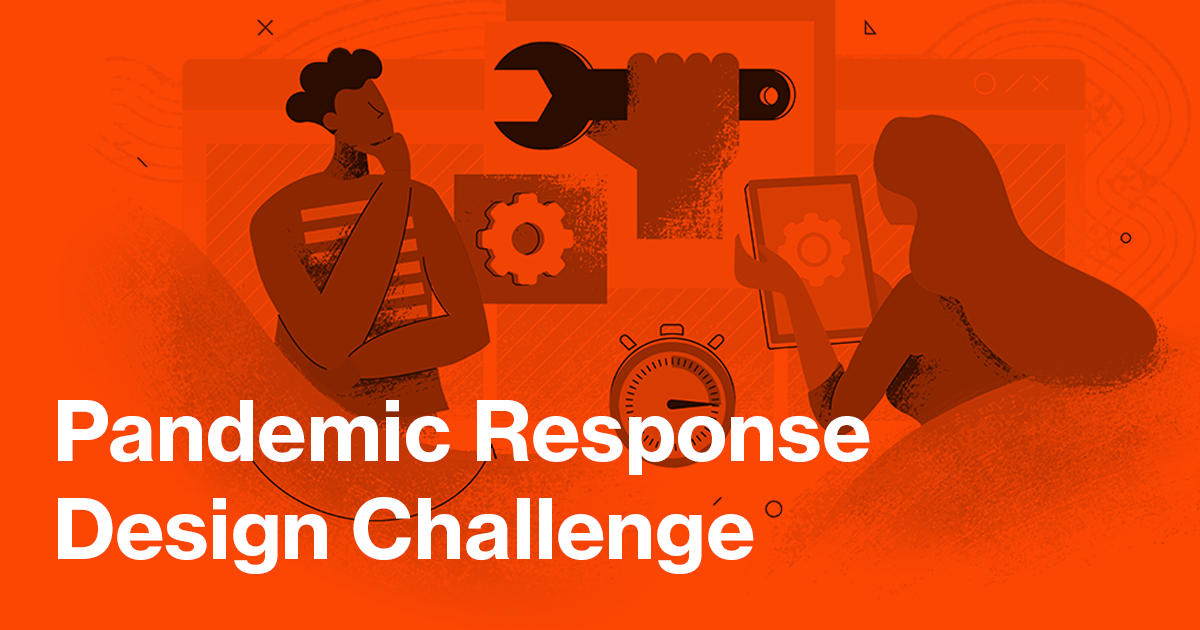
<style>
.page{position:relative;width:1200px;height:630px;background:#fc4604}
.page>*{position:absolute;margin:0}
.t1{font:81.5px "NHaasGroteskTXPro-75Bd";color:#ffffff}
</style>
<div class="page">
<p class="t1" style="left:58px;top:400px;width:812px;height:174px">Pandemic Response<br>Design Challenge</p>
</div>
